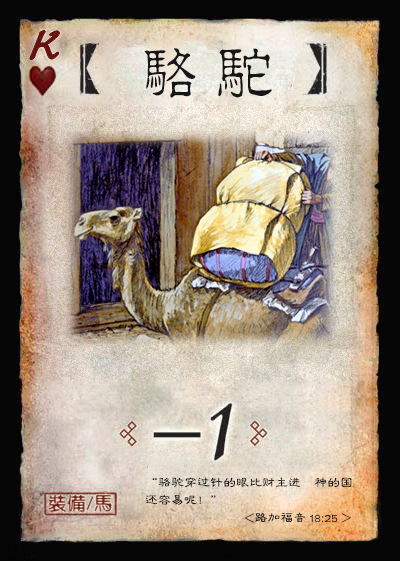
<style>
.page{position:relative;width:400px;height:561px}
.page>*{position:absolute;margin:0}
.t1{font:50px "Jxixinkai";color:#661213;font-weight:bold;font-style:italic}
.t2{font:60px "¾­µä·±½ÇÁ¥ Regular";letter-spacing:0.25em;color:#161616}
.t3{font:13px/17.5px "FZLBJW--GB1-0";color:#161616}
.t4{font:13px "FZLBJW--GB1-0";color:#161616}
</style>
<div class="page">
<p class="t1" style="left:30px;top:30px;width:30px;height:30px">K</p>
<p class="t2" style="left:144px;top:48px;width:128px;height:50px">骆驼</p>
<p class="t3" style="left:146px;top:477px;width:206px;height:28px">“骆驼穿过针的眼比财主进　神的国<br>还容易呢！”</p>
<p class="t4" style="left:244px;top:512px;width:107px;height:11px">&lt;路加福音 18:25 &gt;</p>
</div>
